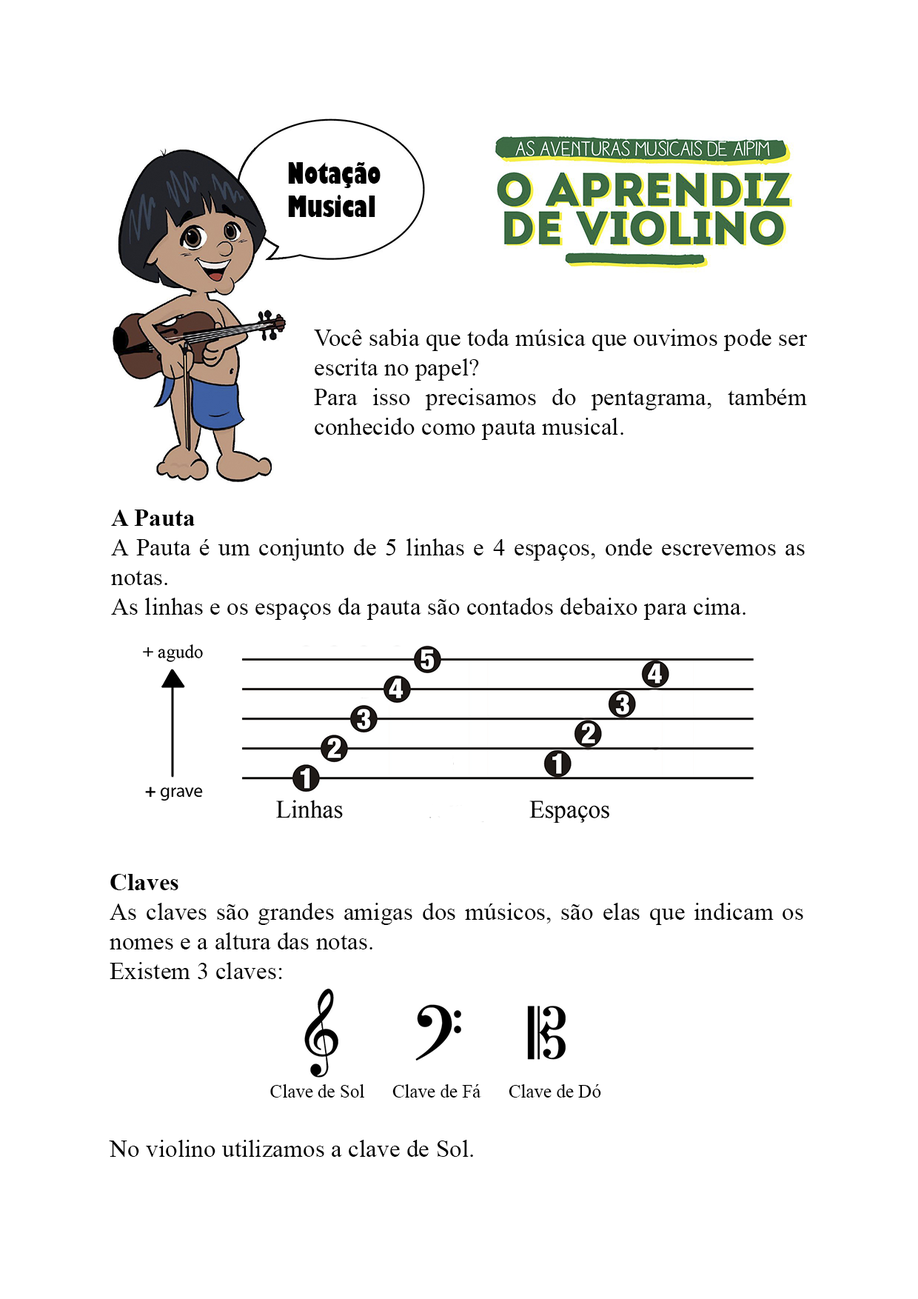
<style>
.page{position:relative;width:918px;height:1299px;background:#ffffff}
.page>*{position:absolute;margin:0}
.t1{font:27.8px "GillSans-UltraBoldCondensed";color:#000000}
.t2{font:24.7px "TimesNewRomanPSMT";color:#000000}
.t3{font:24.7px "TimesNewRomanPS-BoldMT";color:#000000}
.t4{font:18.5px "TimesNewRomanPSMT";color:#000000}
</style>
<div class="page">
<p class="t1" style="left:288px;top:162px;width:93px;height:55px;text-align:justify">Notação<br>Musical</p>
<p class="t2" style="left:314px;top:329px;width:494px;height:111px;text-align:justify">Você sabia que toda música que ouvimos pode ser escrita no papel?<br>Para isso precisamos do pentagrama, também conhecido como pauta musical.</p>
<p class="t2" style="left:111px;top:509px;width:694px;height:111px;text-align:justify"><span class="t3">A Pauta<br></span>A Pauta é um conjunto de 5 linhas e 4 espaços, onde escrevemos as notas.<br>As linhas e os espaços da pauta são contados debaixo para cima.</p>
<p class="t2" style="left:109px;top:874px;width:694px;height:283px;text-align:justify"><span class="t3">Claves<br></span>As claves são grandes amigas dos músicos, são elas que indicam os nomes e a altura das notas.<br>Existem 3 claves:<br><br><br><br>                          <span class="t4">Clave de Sol      Clave de Fá      Clave de Dó<br></span><br>No violino utilizamos a clave de Sol.</p>
</div>
